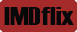
<style>
.page{position:relative;width:77px;height:32px;background:#a52b2b}
.page>*{position:absolute;margin:0}
.t1{font:25.1px "Haettenschweiler";color:#07080a;scale:1.31 1}
</style>
<div class="page">
<p class="t1" style="left:4px;top:7px;width:70px;height:18px">IMDflix</p>
</div>
